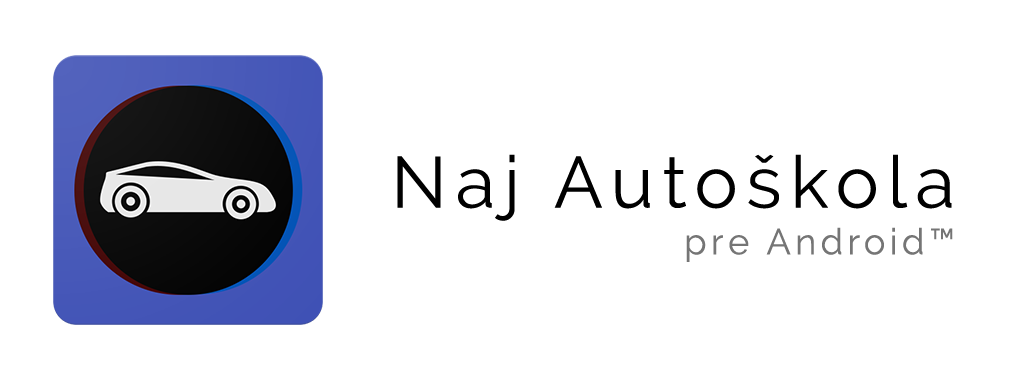
<style>
.page{position:relative;width:1024px;height:380px;background:#ffffff}
.page>*{position:absolute;margin:0}
.t1{font:72px "Raleway";letter-spacing:0.125em;color:#000000}
.t2{font:36px "Raleway";letter-spacing:0.125em;color:#757575}
</style>
<div class="page">
<p class="t1" style="left:397px;top:154px;width:555px;height:67px">Naj Autoškola</p>
<p class="t2" style="left:686px;top:227px;width:267px;height:35px">pre Android™</p>
</div>
